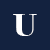
<style>
.page{position:relative;width:50px;height:50px;background:#13223f}
.page>*{position:absolute;margin:0}
.t1{font:7.6px "BodoniSvtyTwoITCTT-Bold";color:#ffffff;text-transform:uppercase;scale:1.19 1}
</style>
<div class="page">
<p class="t1" style="left:13px;top:14px;width:24px;height:22px">u</p>
</div>
